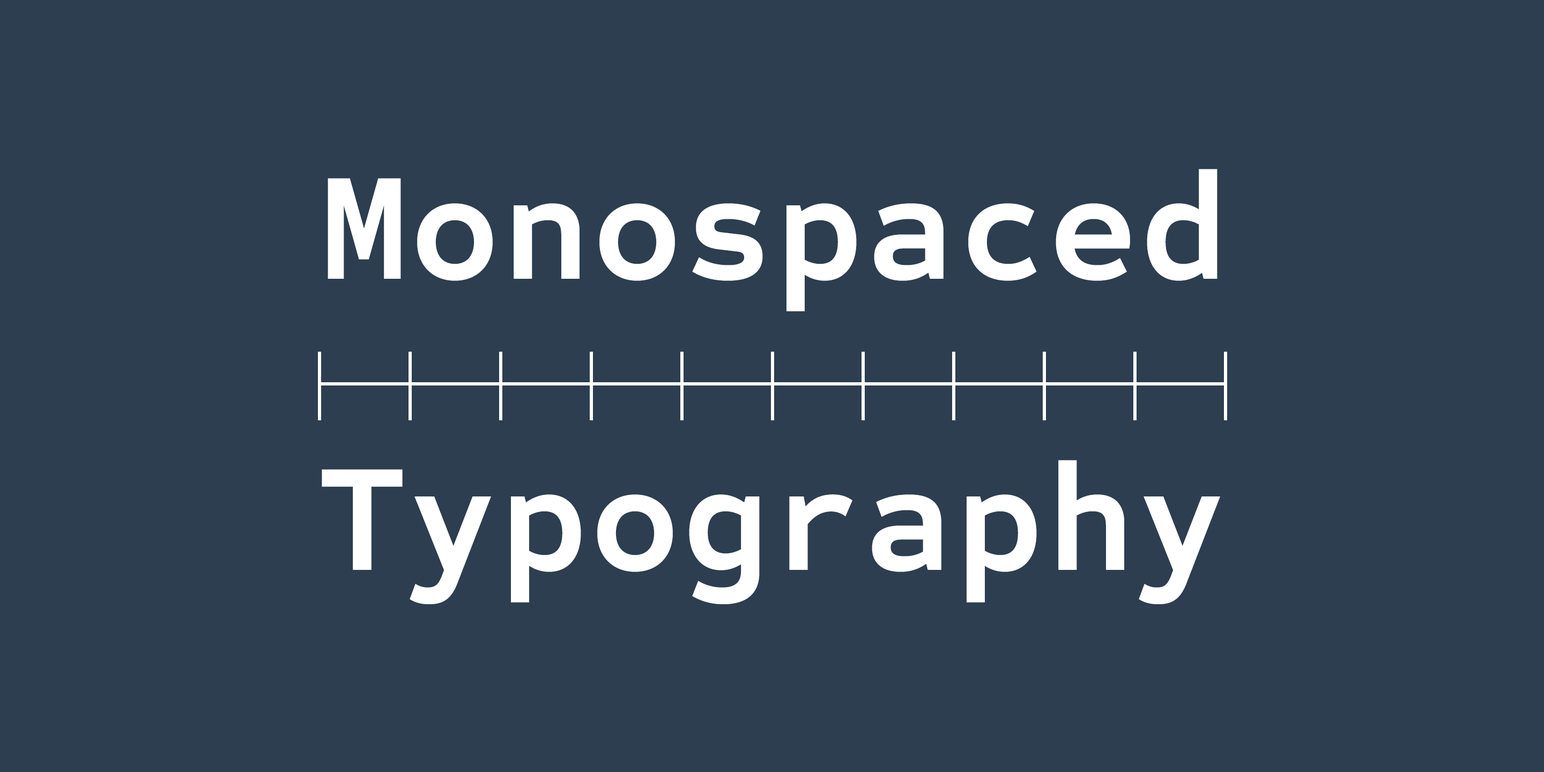
<style>
.page{position:relative;width:1544px;height:772px;background:#2c3e50}
.page>*{position:absolute;margin:0}
.t1{font:154.4px "SometypeMono-Bold";letter-spacing:0.01em;color:#ffffff}
</style>
<div class="page">
<p class="t1" style="left:328px;top:169px;width:890px;height:143px">Monospaced</p>
<p class="t1" style="left:322px;top:460px;width:898px;height:144px">Typography</p>
</div>
